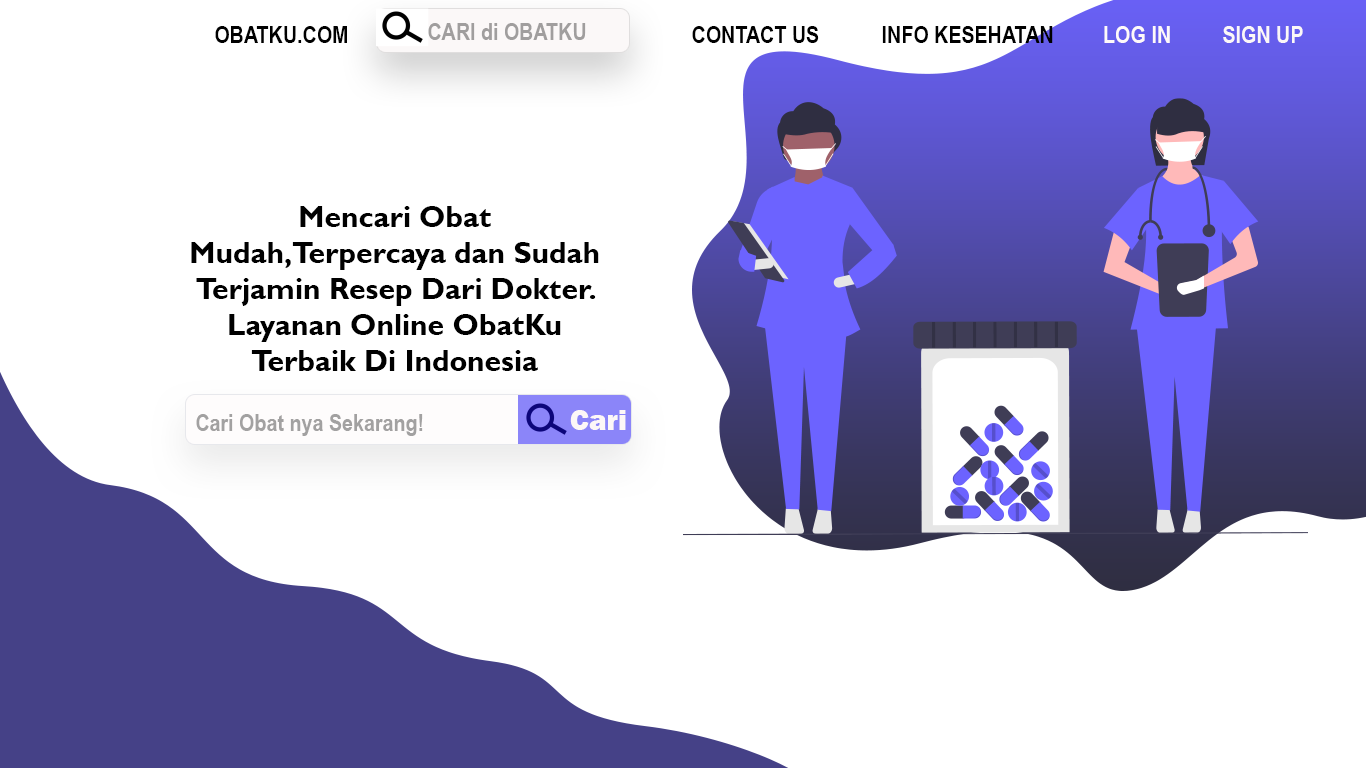
<style>
.page{position:relative;width:1366px;height:768px;background:#ffffff}
.page>*{position:absolute;margin:0}
.t1{font:24px "ArialNarrow-Bold";color:#000000}
.t2{font:24px "ArialNarrow-Bold";color:#a09e9e}
.t3{font:24px "ArialNarrow-Bold";color:#fef9f9}
.t4{font:24px "ArialNarrow-Bold";color:#fbf7f7}
.t5{font:30px "GillSansMT-Bold";color:#000000}
.t6{font:24px "ArialNarrow-Bold";color:#a2a1a1}
.t7{font:30px "FranklinGothic-Heavy";color:#fcf7f7}
</style>
<div class="page">
<p class="t1" style="left:215px;top:26px;width:132px;height:17px">OBATKU.COM</p>
<p class="t2" style="left:428px;top:23px;width:158px;height:17px">CARI di OBATKU</p>
<p class="t1" style="left:692px;top:26px;width:127px;height:17px">CONTACT US</p>
<p class="t1" style="left:882px;top:26px;width:171px;height:17px">INFO KESEHATAN</p>
<p class="t3" style="left:1104px;top:26px;width:66px;height:17px">LOG IN</p>
<p class="t4" style="left:1223px;top:26px;width:80px;height:17px">SIGN UP</p>
<p class="t5" style="left:191px;top:206px;width:408px;height:165px;text-align:center">Mencari Obat Mudah,Terpercaya dan Sudah Terjamin Resep Dari Dokter.<br>Layanan Online ObatKu Terbaik Di Indonesia</p>
<p class="t6" style="left:196px;top:414px;width:227px;height:22px">Cari Obat nya Sekarang!</p>
<p class="t7" style="left:570px;top:410px;width:56px;height:20px">Cari</p>
</div>
